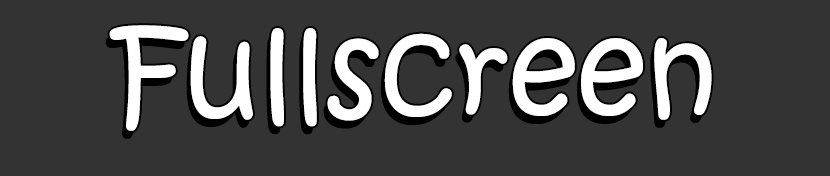
<style>
.page{position:relative;width:830px;height:176px;background:#333333}
.page>*{position:absolute;margin:0}
.t1{font:124.4px "KristenITC-Regular";color:#ffffff}
</style>
<div class="page">
<p class="t1" style="left:109px;top:25px;width:603px;height:106px">Fullscreen</p>
</div>
